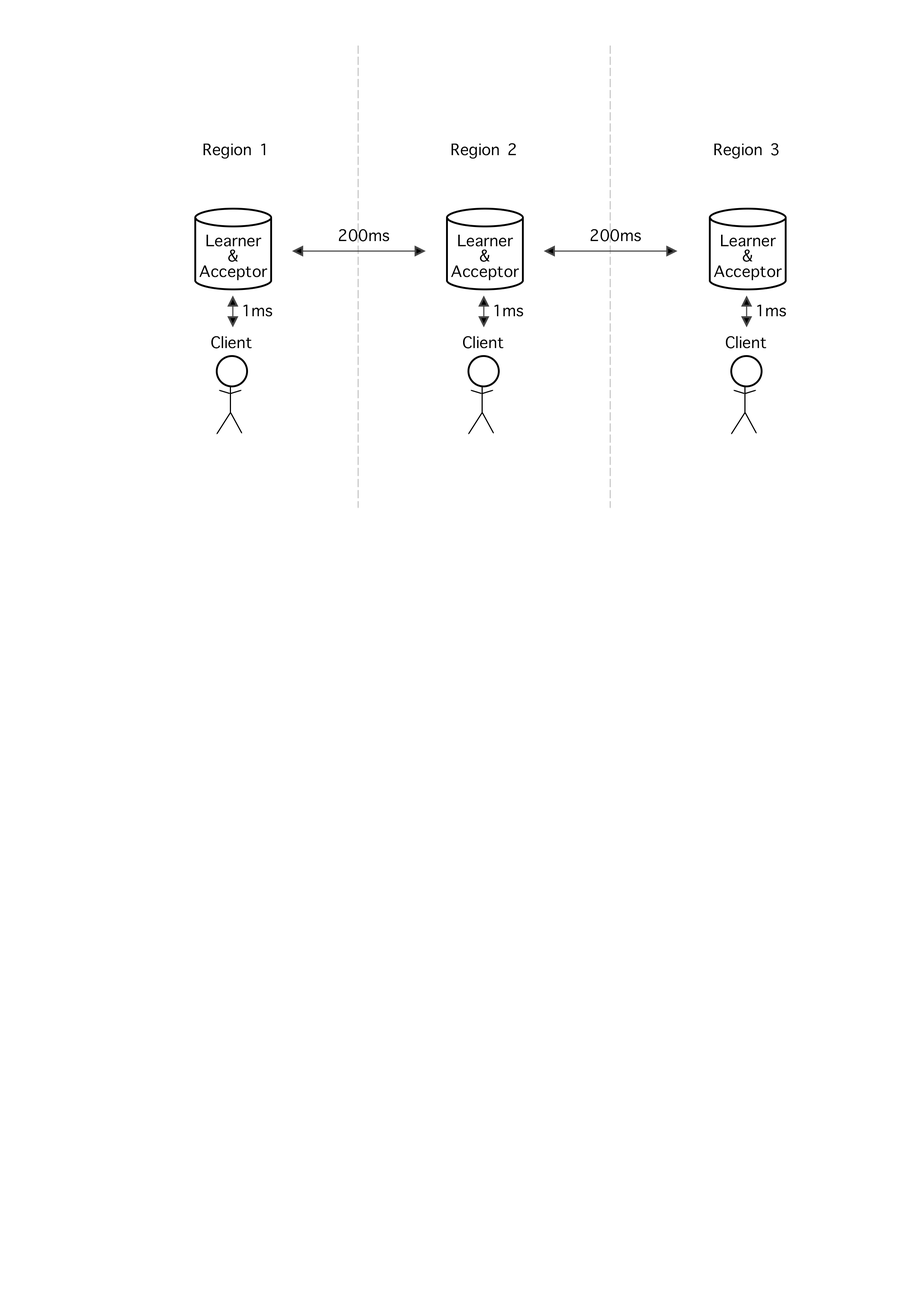
<style>
.page{position:relative;width:918px;height:1299px;background:#ffffff}
.page>*{position:absolute;margin:0}
.t1{font:21.6px "AppleSymbols";color:#000000}
.t2{font:21.6px/15.4px "AppleSymbols";color:#000000}
</style>
<div class="page">
<p class="t1" style="left:204px;top:143px;width:61px;height:16px">Region 1</p>
<p class="t1" style="left:452px;top:143px;width:64px;height:16px">Region 2</p>
<p class="t1" style="left:715px;top:143px;width:64px;height:16px">Region 3</p>
<p class="t1" style="left:339px;top:229px;width:50px;height:12px">200ms</p>
<p class="t1" style="left:591px;top:229px;width:50px;height:12px">200ms</p>
<p class="t2" style="left:199px;top:234px;width:68px;height:46px;text-align:center">Learner<br>&amp;<br>Acceptor</p>
<p class="t2" style="left:451px;top:234px;width:68px;height:46px;text-align:center">Learner<br>&amp;<br>Acceptor</p>
<p class="t2" style="left:714px;top:234px;width:68px;height:46px;text-align:center">Learner<br>&amp;<br>Acceptor</p>
<p class="t1" style="left:244px;top:304px;width:28px;height:13px">1ms</p>
<p class="t1" style="left:495px;top:304px;width:28px;height:13px">1ms</p>
<p class="t1" style="left:757px;top:304px;width:29px;height:13px">1ms</p>
<p class="t1" style="left:211px;top:336px;width:41px;height:12px">Client</p>
<p class="t1" style="left:463px;top:336px;width:41px;height:12px">Client</p>
<p class="t1" style="left:726px;top:336px;width:40px;height:12px">Client</p>
</div>
